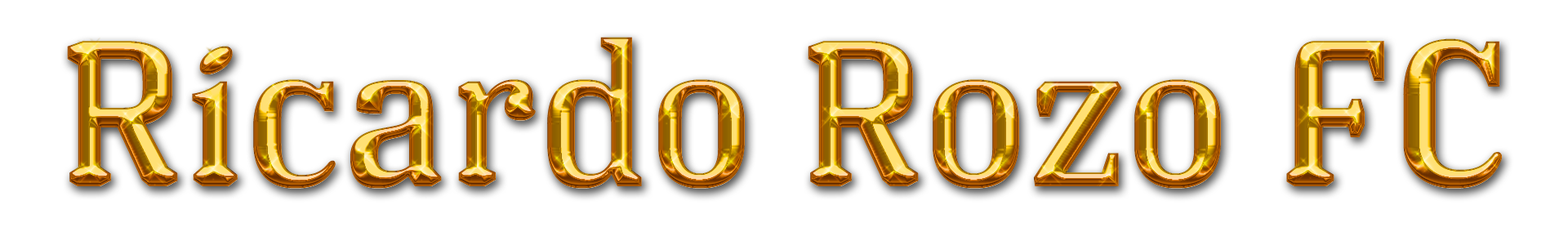
<style>
.page{position:relative;width:1568px;height:232px;background:#ffffff}
.page>*{position:absolute;margin:0}
.t1{font:204.2px "LosFelizOT-Roman"}
</style>
<div class="page">
<p class="t1" style="left:67px;top:37px;width:1435px;height:152px">Ricardo Rozo FC</p>
</div>
